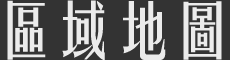
<style>
.page{position:relative;width:230px;height:60px;background:#333333}
.page>*{position:absolute;margin:0}
.t1{font:62px "FZYTK--GBK1-0";color:#ffffff}
</style>
<div class="page">
<p class="t1" style="left:7px;top:0px;width:215px;height:61px;opacity:0.9">區域地圖</p>
</div>
